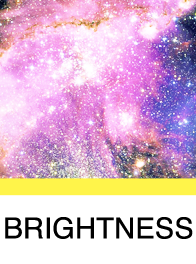
<style>
.page{position:relative;width:196px;height:264px;background:#ffffff}
.page>*{position:absolute;margin:0}
.t1{font:28.9px "Helvetica";color:#000000}
</style>
<div class="page">
<p class="t1" style="left:5px;top:217px;width:188px;height:22px">BRIGHTNESS</p>
</div>
